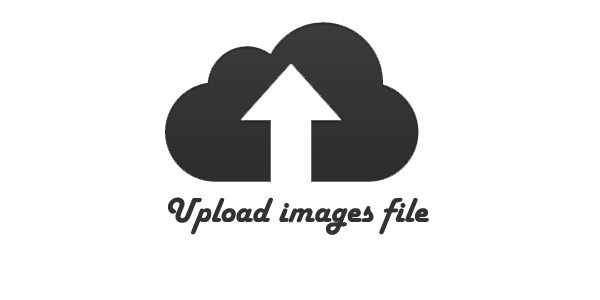
<style>
.page{position:relative;width:600px;height:300px;background:#ffffff}
.page>*{position:absolute;margin:0}
.t1{font:36px "HarlowSolid";color:#323232}
</style>
<div class="page">
<p class="t1" style="left:168px;top:197px;width:261px;height:38px">Upload images file</p>
</div>
